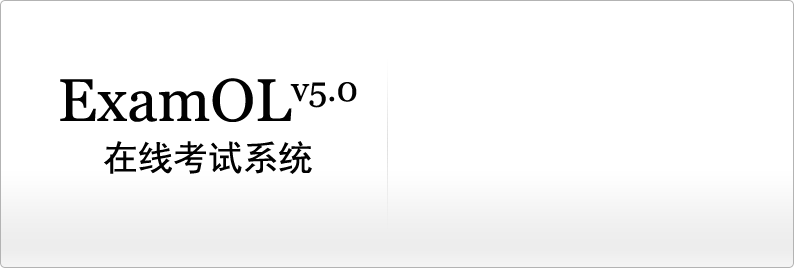
<style>
.page{position:relative;width:794px;height:268px;background:#ffffff}
.page>*{position:absolute;margin:0}
.t1{font:60px "Vani";color:#010101}
.t2{font:60px "SimHei";color:#010101}
</style>
<div class="page">
<p class="t1" style="left:60px;top:78px;width:297px;height:44px">ExamOLv5.0</p>
<p class="t2" style="left:104px;top:141px;width:208px;height:33px">在线考试系统</p>
</div>
